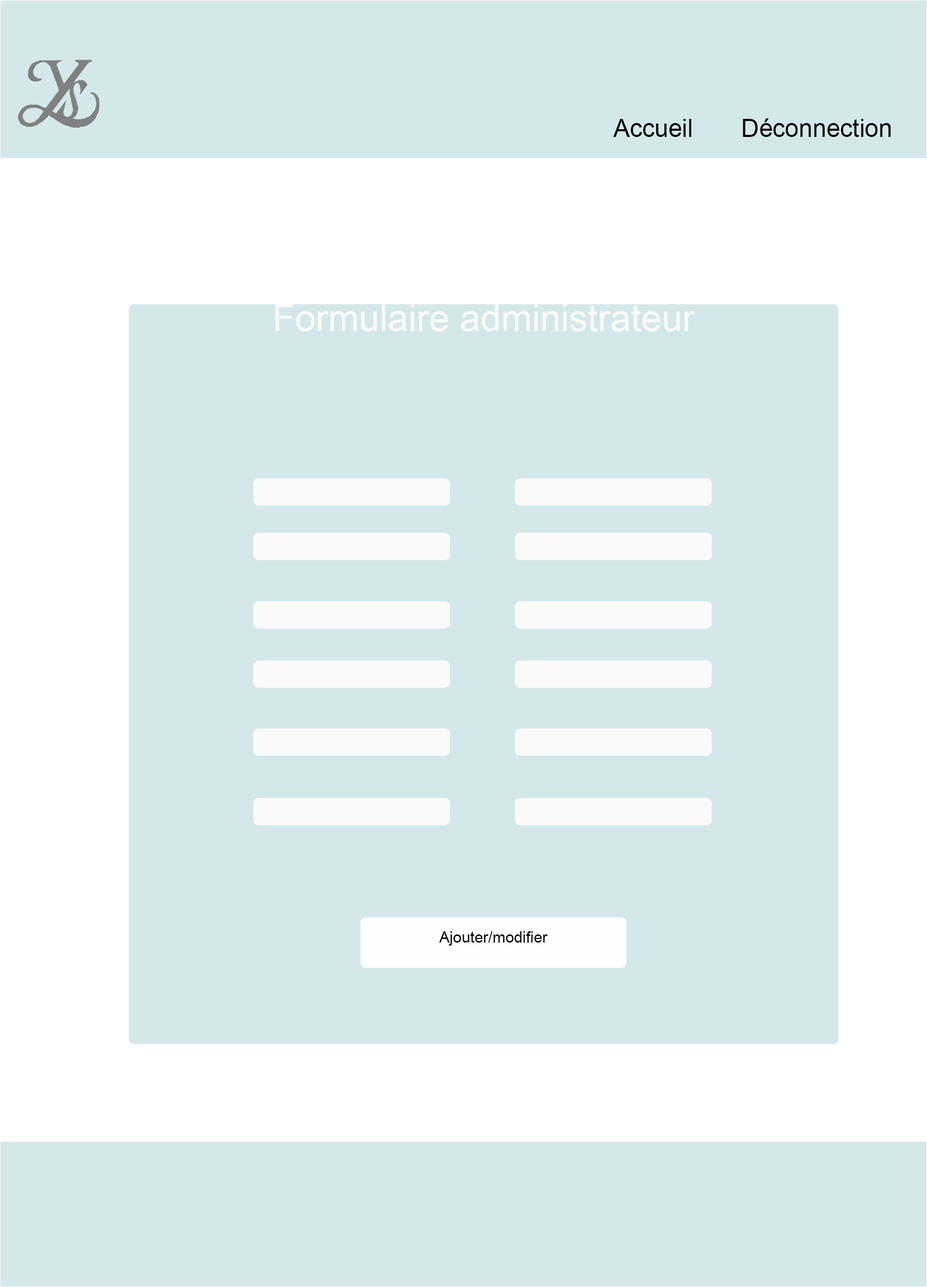
<style>
.page{position:relative;width:927px;height:1287px;background:#d5e8e9}
.page>*{position:absolute;margin:0}
.t1{font:24.7px "ArialMT";color:#040404}
.t2{font:37.1px "ArialMT";color:#fafaf9}
.t3{font:15.4px "ArialMT";color:#050505}
</style>
<div class="page">
<p class="t1" style="left:613px;top:118px;width:278px;height:19px">Accueil       Déconnection</p>
<p class="t2" style="left:275px;top:304px;width:420px;height:28px">Formulaire administrateur</p>
<p class="t3" style="left:439px;top:931px;width:109px;height:15px">Ajouter/modifier</p>
</div>
